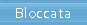
<style>
.page{position:relative;width:87px;height:25px}
.page>*{position:absolute;margin:0}
.t1{font:16px "Corbel";color:#ffffff}
</style>
<div class="page">
<p class="t1" style="left:16px;top:7px;width:54px;height:11px">Bloccata</p>
</div>
